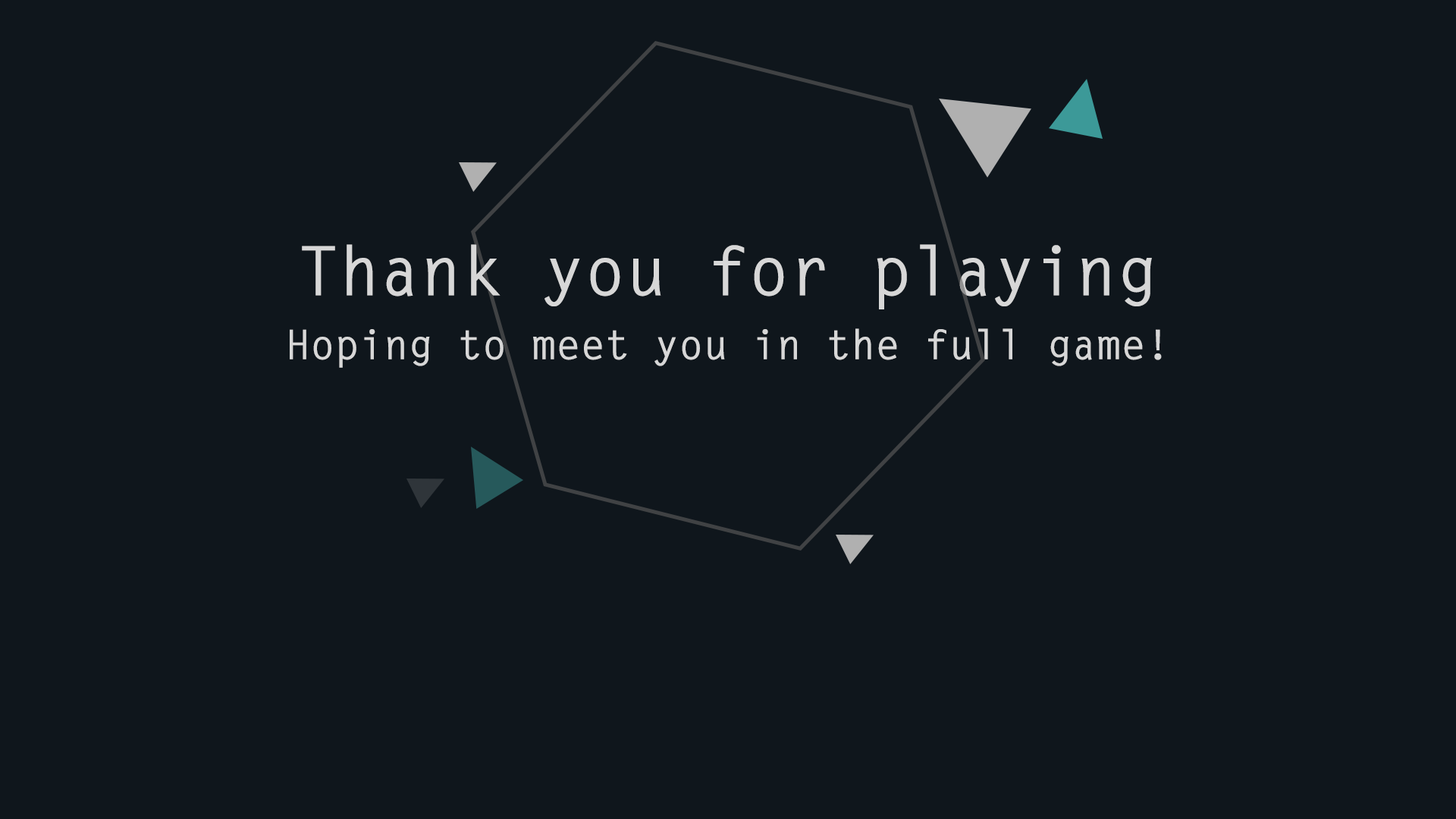
<style>
.page{position:relative;width:1456px;height:819px;background:#0f161c}
.page>*{position:absolute;margin:0}
.t1{font:40.9px "LetterGothicStd-Bold";color:#d7d7d7}
.t2{font:68.2px "LetterGothicStd-Bold";color:#d7d7d7}
</style>
<div class="page">
<p class="t1" style="left:290px;top:244px;width:872px;height:124px;text-align:center"><span class="t2">Thank you for playing<br></span>Hoping to meet you in the full game!</p>
</div>
